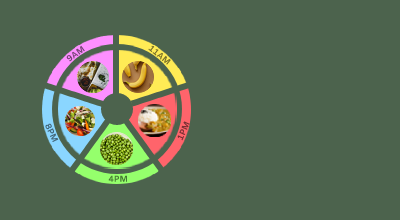
<style>
.page{position:relative;width:400px;height:220px;background:#4c634d}
.page>*{position:absolute;margin:0}
.t1{font:8.6px "Amiko-Bold";color:#774378}
.t2{font:8.6px "Amiko-Bold";color:#786f28}
.t3{font:8.6px "Amiko-Bold";color:#416578}
.t4{font:8.6px "Amiko-Bold";color:#782f32}
.t5{font:8.6px "Amiko-Bold";color:#467833}
</style>
<div class="page">
<p class="t1" style="left:66px;top:45px;width:19px;height:17px;rotate:-36deg">9AM</p>
<p class="t2" style="left:148px;top:45px;width:23px;height:20px;rotate:39deg">11AM</p>
<p class="t3" style="left:45px;top:123px;width:14px;height:19px;rotate:64deg">8PM</p>
<p class="t4" style="left:177px;top:121px;width:13px;height:20px;rotate:-66deg">1PM</p>
<p class="t5" style="left:108px;top:175px;width:19px;height:7px">4PM</p>
</div>
